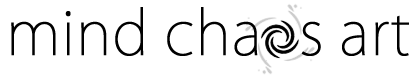
<style>
.page{position:relative;width:420px;height:78px;background:#ffffff}
.page>*{position:absolute;margin:0}
.t1{font:60px "KozGoPro-ExtraLight";letter-spacing:-0.01em;color:#000000;font-weight:bold}
</style>
<div class="page">
<p class="t1" style="left:11px;top:7px;width:398px;height:49px">mind chaos art</p>
</div>
